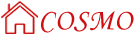
<style>
.page{position:relative;width:136px;height:34px;background:#ffffff}
.page>*{position:absolute;margin:0}
.t1{font:30px "MonotypeCorsiva";letter-spacing:0.025em;color:#cf0f0f;text-transform:uppercase}
</style>
<div class="page">
<p class="t1" style="left:41px;top:11px;width:93px;height:22px">COSMO</p>
</div>
